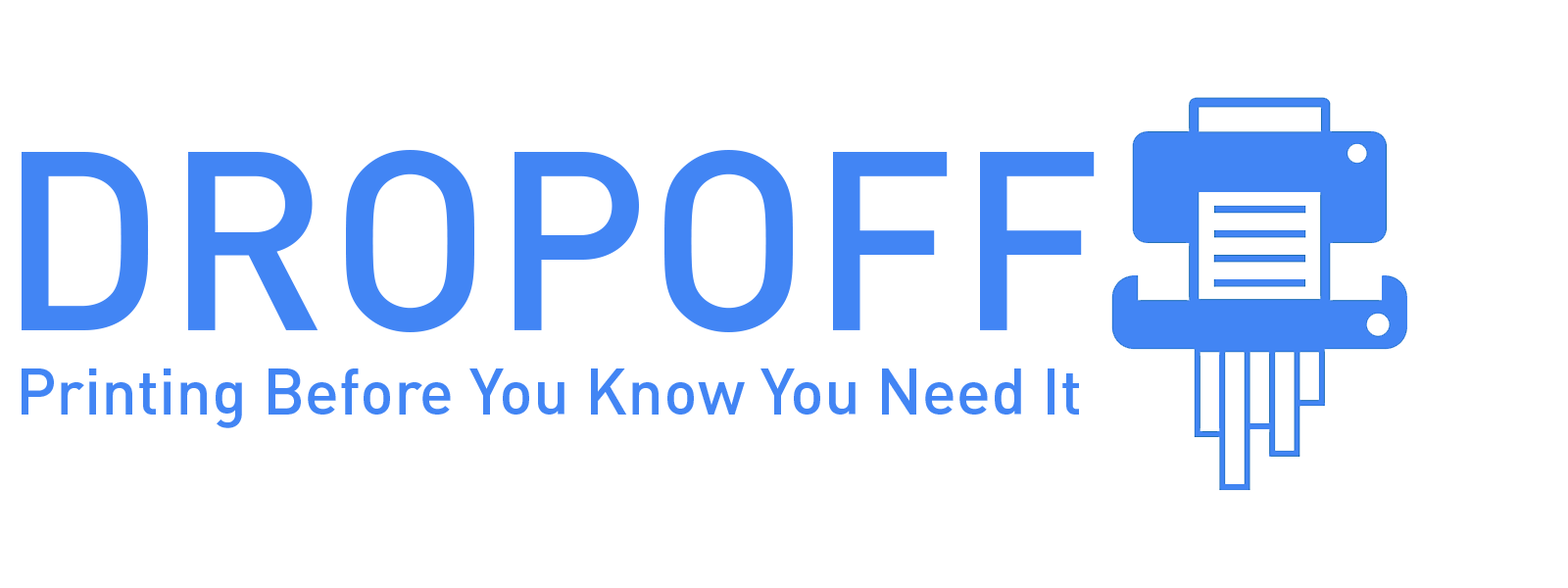
<style>
.page{position:relative;width:1568px;height:588px;background:#ffffff}
.page>*{position:absolute;margin:0}
.t1{font:250.4px "DIN-Medium";color:#4285f4}
.t2{font:63.9px "DIN-Medium";color:#4285f4}
</style>
<div class="page">
<p class="t1" style="left:22px;top:150px;width:1073px;height:182px">DROPOFF</p>
<p class="t2" style="left:22px;top:368px;width:1057px;height:60px">Printing Before You Know You Need It</p>
</div>
